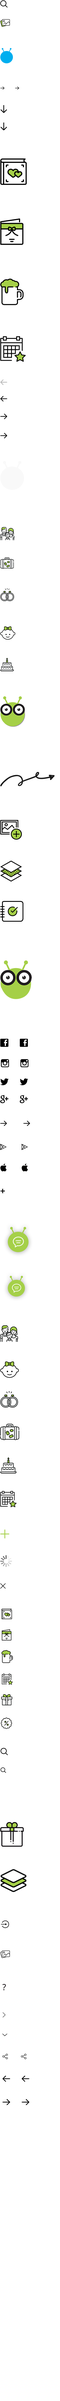
<style>
.page{position:relative;width:60px;height:2401px;background:#ffffff}
.page>*{position:absolute;margin:0}
.t1{font:9px "OpenSans-Semibold";letter-spacing:0.08em;color:#000000;text-transform:uppercase}
.t2{font:18.9px "OpenSans-Light";letter-spacing:0.08em;color:#a5d048;text-transform:uppercase}
.t3{font:8.4px "OpenSans";letter-spacing:0.08em;color:#221e20;text-transform:uppercase}
</style>
<div class="page">
<p class="t1" style="left:0px;top:1189px;width:5px;height:4px">+</p>
<p class="t2" style="left:0px;top:1529px;width:9px;height:9px">+</p>
<p class="t3" style="left:2px;top:1983px;width:4px;height:7px">?</p>
</div>
